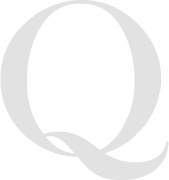
<style>
.page{position:relative;width:169px;height:180px;background:#ffffff}
.page>*{position:absolute;margin:0}
.t1{font:224px "BaskOldFace";letter-spacing:0.04em;color:#e2e2e2}
</style>
<div class="page">
<p class="t1" style="left:0px;top:0px;width:169px;height:180px">Q</p>
</div>
